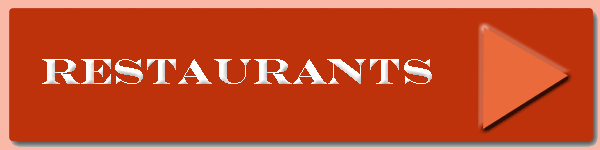
<style>
.page{position:relative;width:600px;height:150px;background:#bd320b}
.page>*{position:absolute;margin:0}
.t1{font:36px "EngraversMT-Bold";color:#ffffff}
</style>
<div class="page">
<p class="t1" style="left:42px;top:59px;width:390px;height:25px">restaurants</p>
</div>
